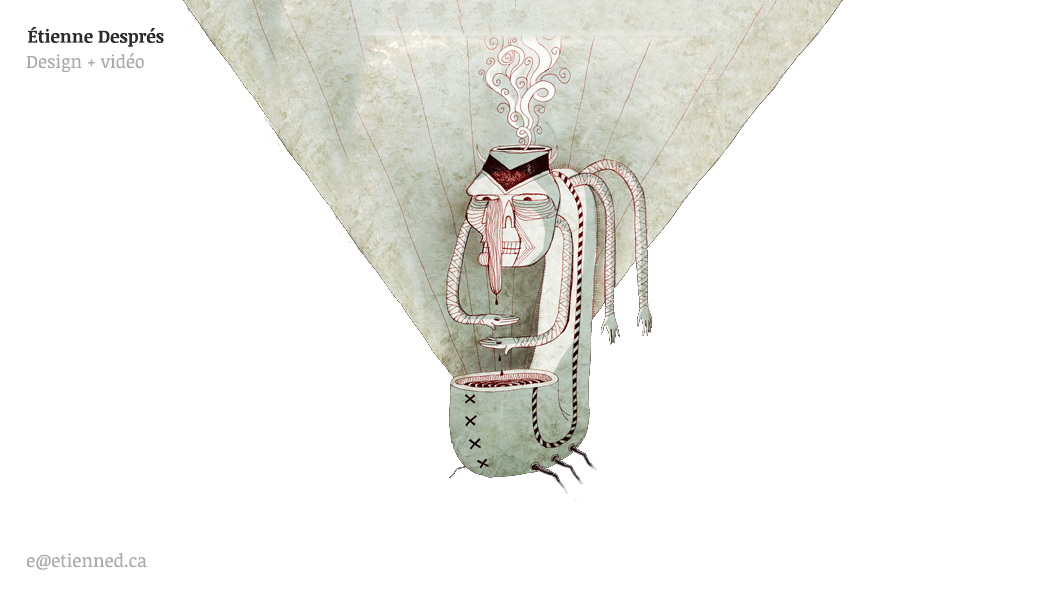
<style>
.page{position:relative;width:1057px;height:600px;background:#ffffff}
.page>*{position:absolute;margin:0}
.t1{font:18px "NoticiaText-Bold";color:#2b2b2b}
.t2{font:18px "NoticiaText-Regular";color:#ababab}
</style>
<div class="page">
<p class="t1" style="left:28px;top:27px;width:136px;height:20px">Étienne Després</p>
<p class="t2" style="left:26px;top:53px;width:118px;height:19px">Design + vidéo</p>
<p class="t2" style="left:27px;top:553px;width:120px;height:17px">e@etienned.ca</p>
</div>
